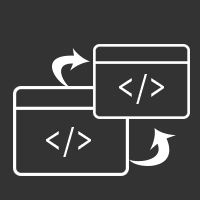
<style>
.page{position:relative;width:200px;height:200px;background:#333333}
.page>*{position:absolute;margin:0}
.t1{font:33px "Sen-Regular";letter-spacing:0.05em;color:#ffffff}
</style>
<div class="page">
<p class="t1" style="left:119px;top:74px;width:45px;height:30px">&lt;/&gt;</p>
<p class="t1" style="left:46px;top:127px;width:45px;height:30px">&lt;/&gt;</p>
</div>
